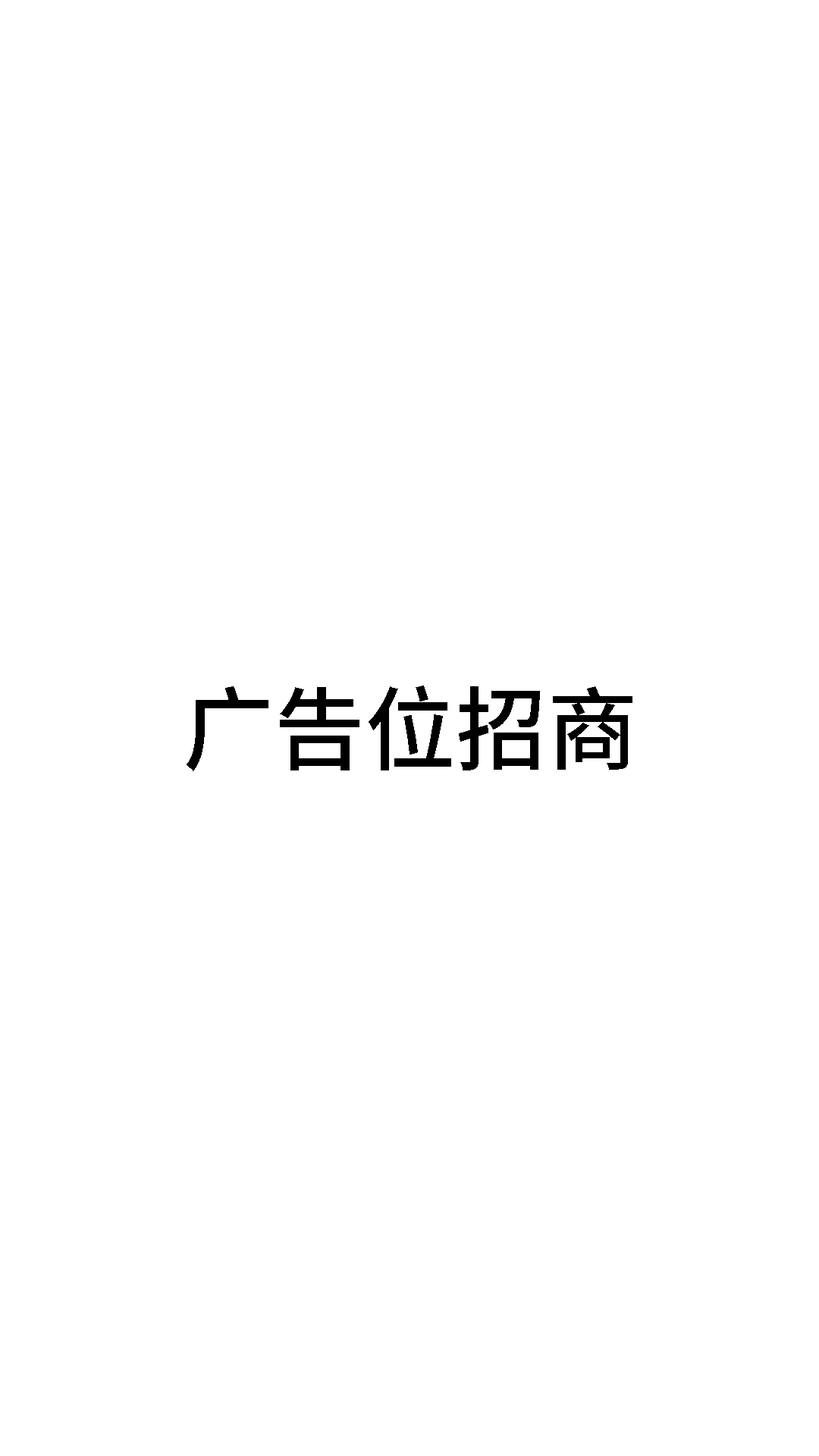
<style>
.page{position:relative;width:819px;height:1456px;background:#ffffff}
.page>*{position:absolute;margin:0}
.t1{font:91px "SourceHanSansCN-Medium";color:#000000}
</style>
<div class="page">
<p class="t1" style="left:187px;top:686px;width:445px;height:85px">广告位招商</p>
</div>
